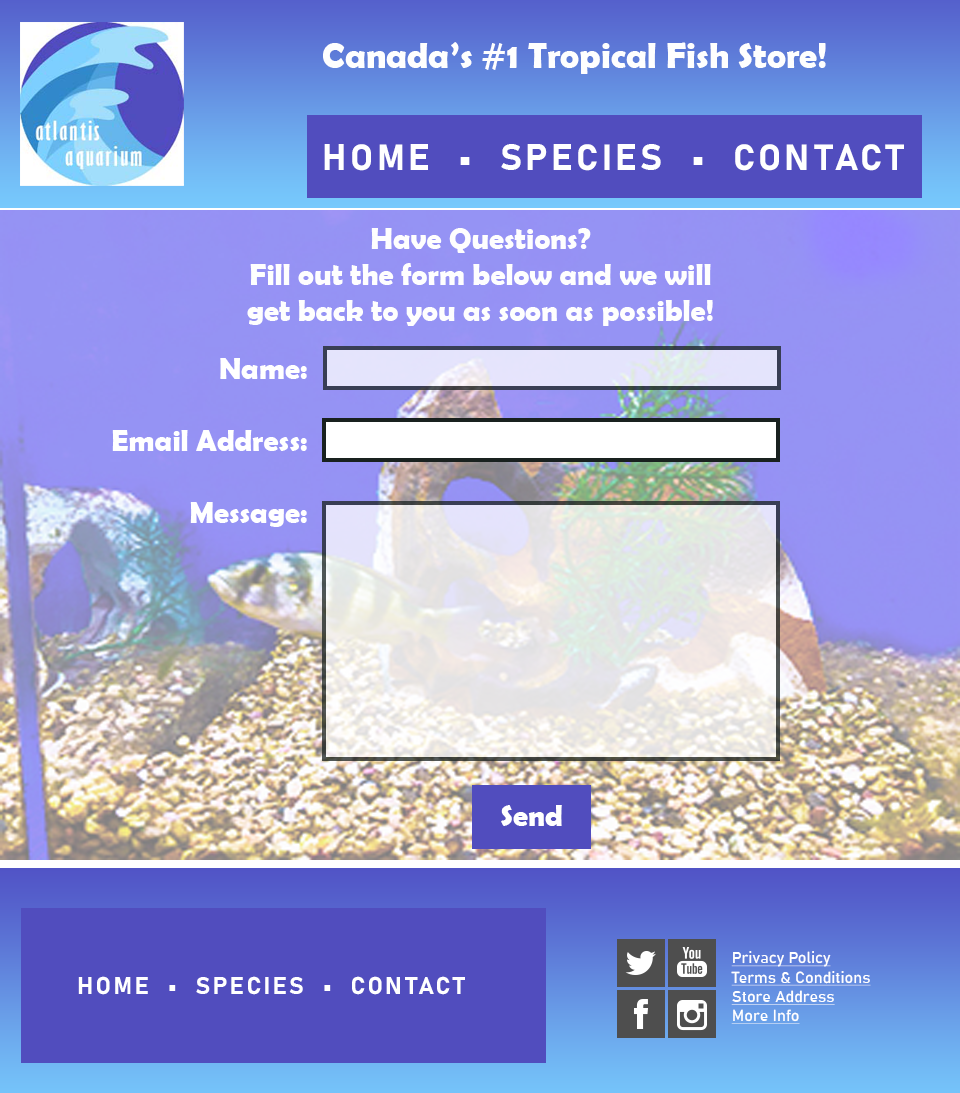
<style>
.page{position:relative;width:960px;height:1093px}
.page>*{position:absolute;margin:0}
.t1{font:36px "BerlinSansFBDemi-Bold";color:#fefefe}
.t2{font:36px "Bahnschrift-Bold";letter-spacing:0.1em;color:#ffffff}
.t3{font:30px "BerlinSansFBDemi-Bold";color:#fefefe}
.t4{font:30px "BerlinSansFBDemi-Bold";color:#ffffff}
.t5{font:16px "Bahnschrift";color:#ffffff;text-decoration:underline}
.t6{font:24px "Bahnschrift-Bold";letter-spacing:0.1em;color:#ffffff}
</style>
<div class="page">
<p class="t1" style="left:323px;top:42px;width:503px;height:32px">Canada’s #1 Tropical Fish Store!</p>
<p class="t2" style="left:324px;top:144px;width:580px;height:27px">HOME  •  SPECIES  •  CONTACT</p>
<p class="t3" style="left:247px;top:228px;width:466px;height:98px;text-align:center">Have Questions?<br>Fill out the form below and we will get back to you as soon as possible!</p>
<p class="t4" style="left:112px;top:358px;width:195px;height:169px;text-align:right">Name:<br><br>Email Address:<br><br>Message:</p>
<p class="t4" style="left:501px;top:805px;width:61px;height:21px">Send</p>
<p class="t5" style="left:731px;top:951px;width:140px;height:73px">Privacy Policy<br>Terms &amp; Conditions<br>Store Address<br>More Info</p>
<p class="t6" style="left:78px;top:976px;width:387px;height:19px">HOME  •  SPECIES  •  CONTACT</p>
</div>
